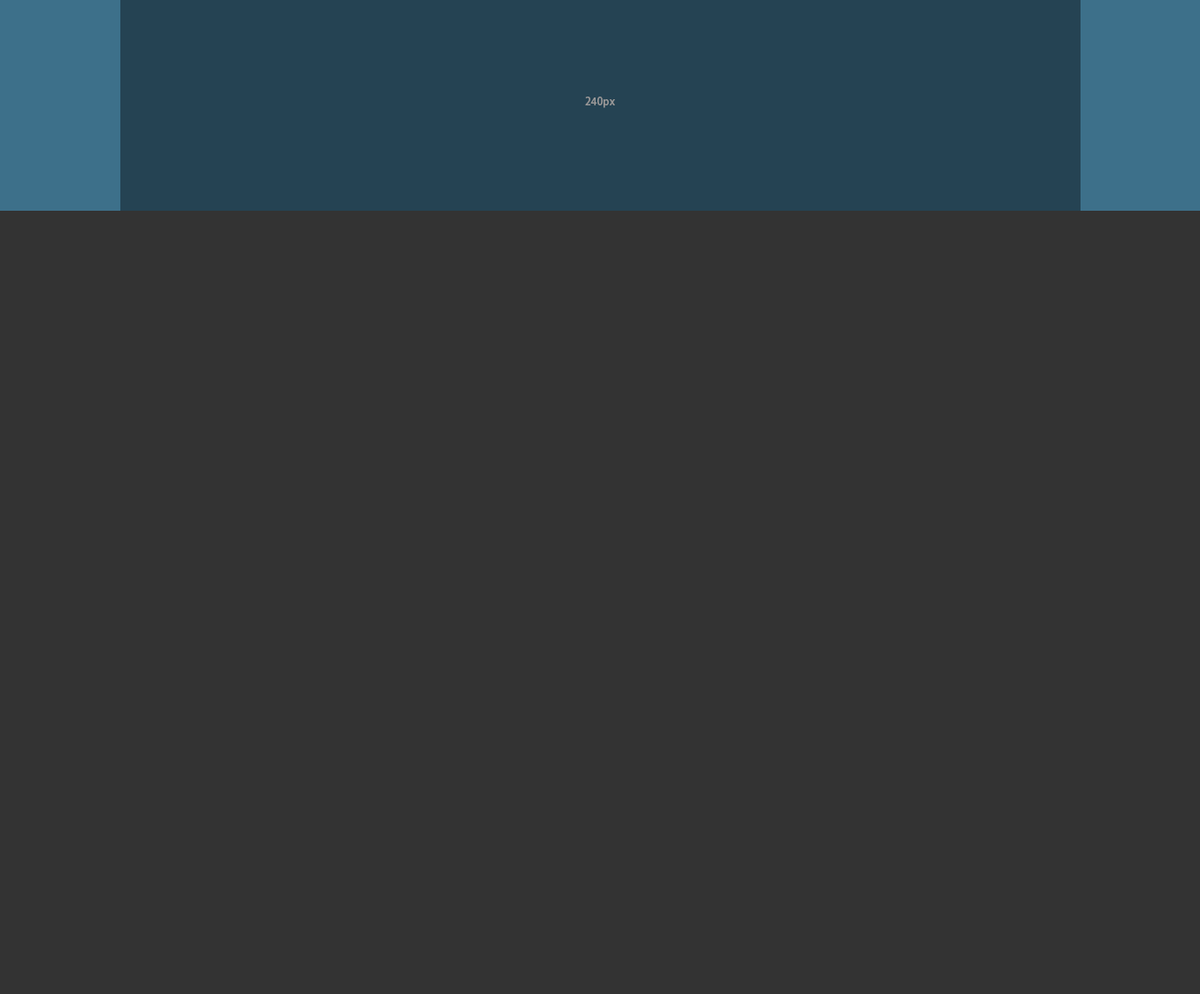
<style>
.page{position:relative;width:1200px;height:994px;background:#333333}
.page>*{position:absolute;margin:0}
.t1{font:10.5px "AdobeHeitiStd-Regular";color:#999898}
</style>
<div class="page">
<p class="t1" style="left:585px;top:97px;width:30px;height:11px">240px</p>
</div>
